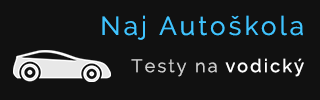
<style>
.page{position:relative;width:320px;height:100px;background:#111111}
.page>*{position:absolute;margin:0}
.t1{font:26px "Raleway";letter-spacing:0.125em;color:#40c4ff}
.t2{font:18px "Raleway";letter-spacing:0.125em;color:#cdcdcd}
.t3{font:18px "Raleway-Medium";letter-spacing:0.125em;color:#ffffff}
</style>
<div class="page">
<p class="t1" style="left:102px;top:15px;width:201px;height:25px">Naj Autoškola</p>
<p class="t2" style="left:131px;top:59px;width:86px;height:18px">Testy na</p>
<p class="t3" style="left:225px;top:58px;width:79px;height:19px">vodický</p>
</div>
